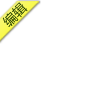
<style>
.page{position:relative;width:90px;height:90px;background:#ffffff}
.page>*{position:absolute;margin:0}
.t1{font:13px "MicrosoftYaHei";color:#284300}
</style>
<div class="page">
<p class="t1" style="left:2px;top:2px;width:26px;height:25px;rotate:-45deg">编辑</p>
</div>
